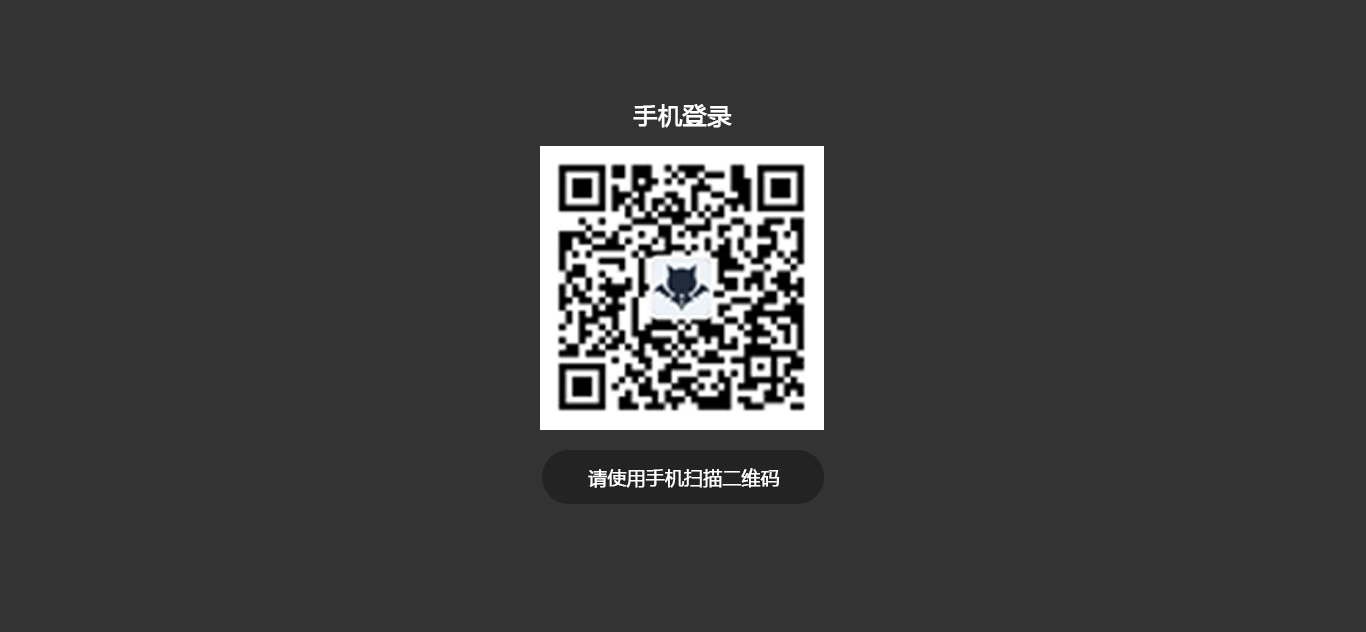
<style>
.page{position:relative;width:1366px;height:632px;background:#333333}
.page>*{position:absolute;margin:0}
.t1{font:24px "MicrosoftYaHeiUI";color:#ffffff;font-weight:bold}
.t2{font:18.7px "MicrosoftYaHeiUI";color:#ffffff;font-weight:bold}
</style>
<div class="page">
<p class="t1" style="left:633px;top:104px;width:99px;height:24px">手机登录</p>
<p class="t2" style="left:588px;top:468px;width:192px;height:20px">请使用手机扫描二维码</p>
</div>
